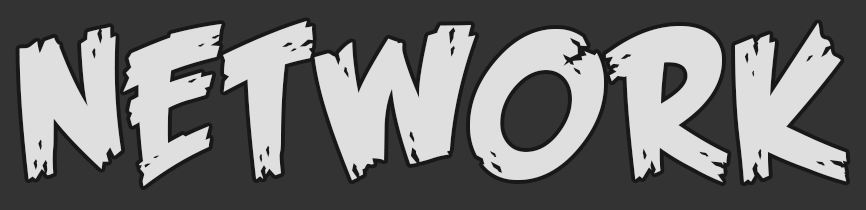
<style>
.page{position:relative;width:866px;height:210px;background:#333333}
.page>*{position:absolute;margin:0}
.t1{font:200px "FeastofFleshBB";color:#dfdfdf}
</style>
<div class="page">
<p class="t1" style="left:19px;top:21px;width:828px;height:166px">NETWORK</p>
</div>
